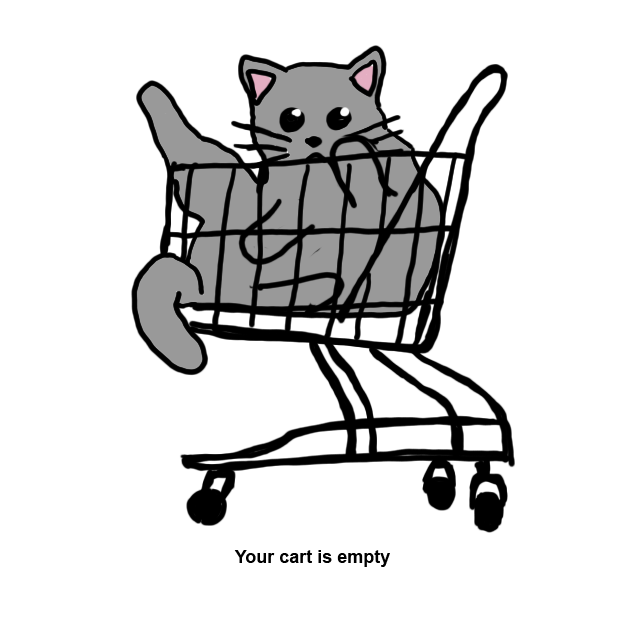
<style>
.page{position:relative;width:626px;height:626px;background:#ffffff}
.page>*{position:absolute;margin:0}
.t1{font:18px "Arial-BoldMT";color:#000000}
</style>
<div class="page">
<p class="t1" style="left:234px;top:550px;width:156px;height:17px">Your cart is empty</p>
</div>
